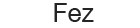
<style>
.page{position:relative;width:140px;height:28px;background:#ffffff}
.page>*{position:absolute;margin:0}
.t1{font:26.1px "HelveticaNeue";color:#242424}
</style>
<div class="page">
<p class="t1" style="left:54px;top:3px;width:40px;height:19px">Fez</p>
</div>
